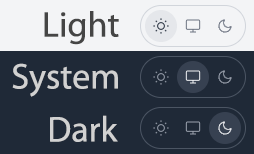
<style>
.page{position:relative;width:254px;height:154px;background:#1f2937}
.page>*{position:absolute;margin:0}
.t1{font:36px "MyriadPro-Regular";color:#454545}
.t2{font:36px "MyriadPro-Regular";color:#d1d1d1}
</style>
<div class="page">
<p class="t1" style="left:44px;top:11px;width:75px;height:34px">Light</p>
<p class="t2" style="left:12px;top:63px;width:106px;height:34px">System</p>
<p class="t2" style="left:50px;top:115px;width:68px;height:27px">Dark</p>
</div>
